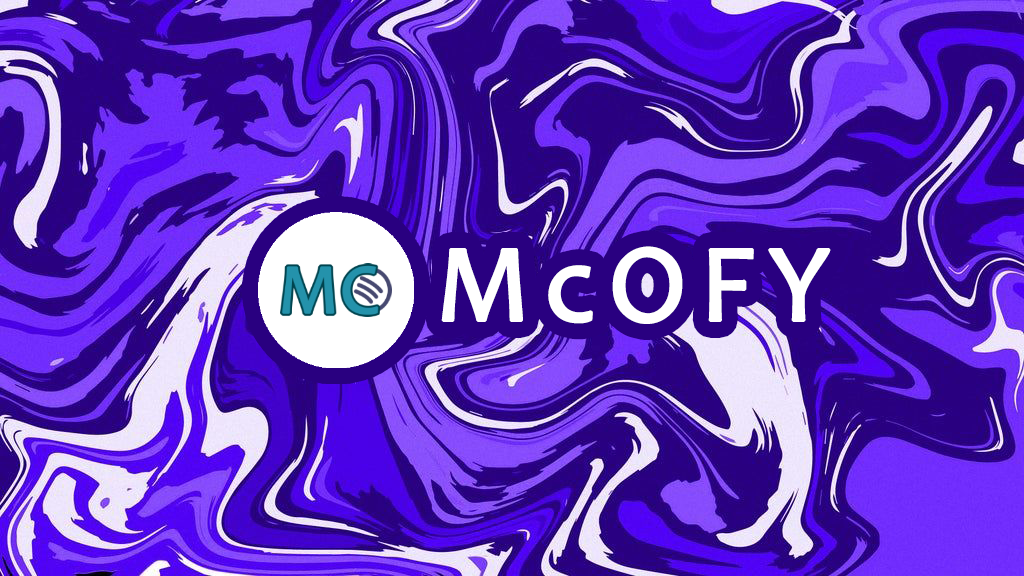
<style>
.page{position:relative;width:1024px;height:576px}
.page>*{position:absolute;margin:0}
.t1{font:111.2px "Candara";letter-spacing:0.1em;color:#ffffff;font-weight:bold}
</style>
<div class="page">
<p class="t1" style="left:441px;top:246px;width:390px;height:78px">McOFY</p>
</div>
